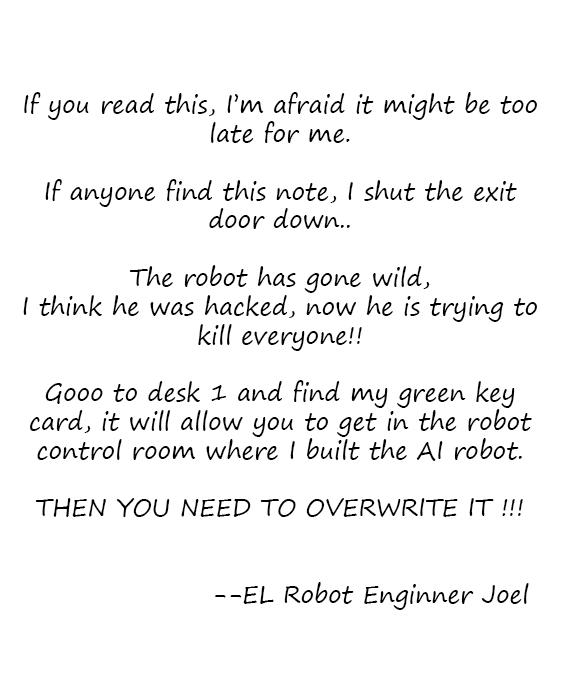
<style>
.page{position:relative;width:576px;height:688px;background:#ffffff}
.page>*{position:absolute;margin:0}
.t1{font:24px "SegoePrint";color:#000000}
</style>
<div class="page">
<p class="t1" style="left:23px;top:92px;width:514px;height:518px;text-align:center">If you read this, I’m afraid it might be too late for me.<br><br>If anyone find this note, I shut the exit door down..<br><br>The robot has gone wild, <br>I think he was hacked, now he is trying to kill everyone!!<br><br>Gooo to desk 1 and find my green key card, it will allow you to get in the robot control room where I built the AI robot.<br><br>THEN YOU NEED TO OVERWRITE IT !!!<br><br><br>     --EL Robot Enginner Joel</p>
</div>
